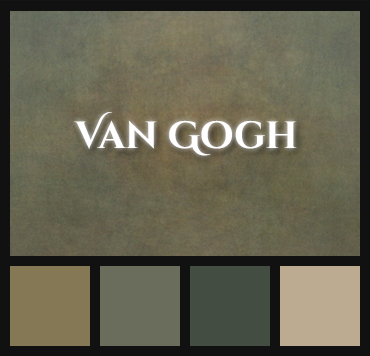
<style>
.page{position:relative;width:370px;height:356px}
.page>*{position:absolute;margin:0}
.t1{font:38px "CinzelDecorative-Bold";color:#ffffff}
</style>
<div class="page">
<p class="t1" style="left:74px;top:112px;width:223px;height:44px">Van Gogh</p>
</div>
